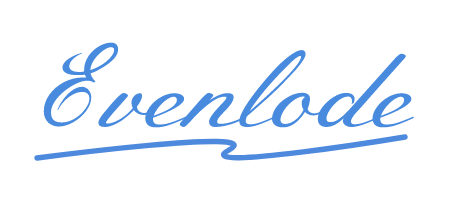
<style>
.page{position:relative;width:450px;height:200px;background:#ffffff}
.page>*{position:absolute;margin:0}
.t1{font:116px "MeieScript-Regular";color:#478ade}
</style>
<div class="page">
<p class="t1" style="left:43px;top:42px;width:371px;height:86px">Evenlode</p>
</div>
